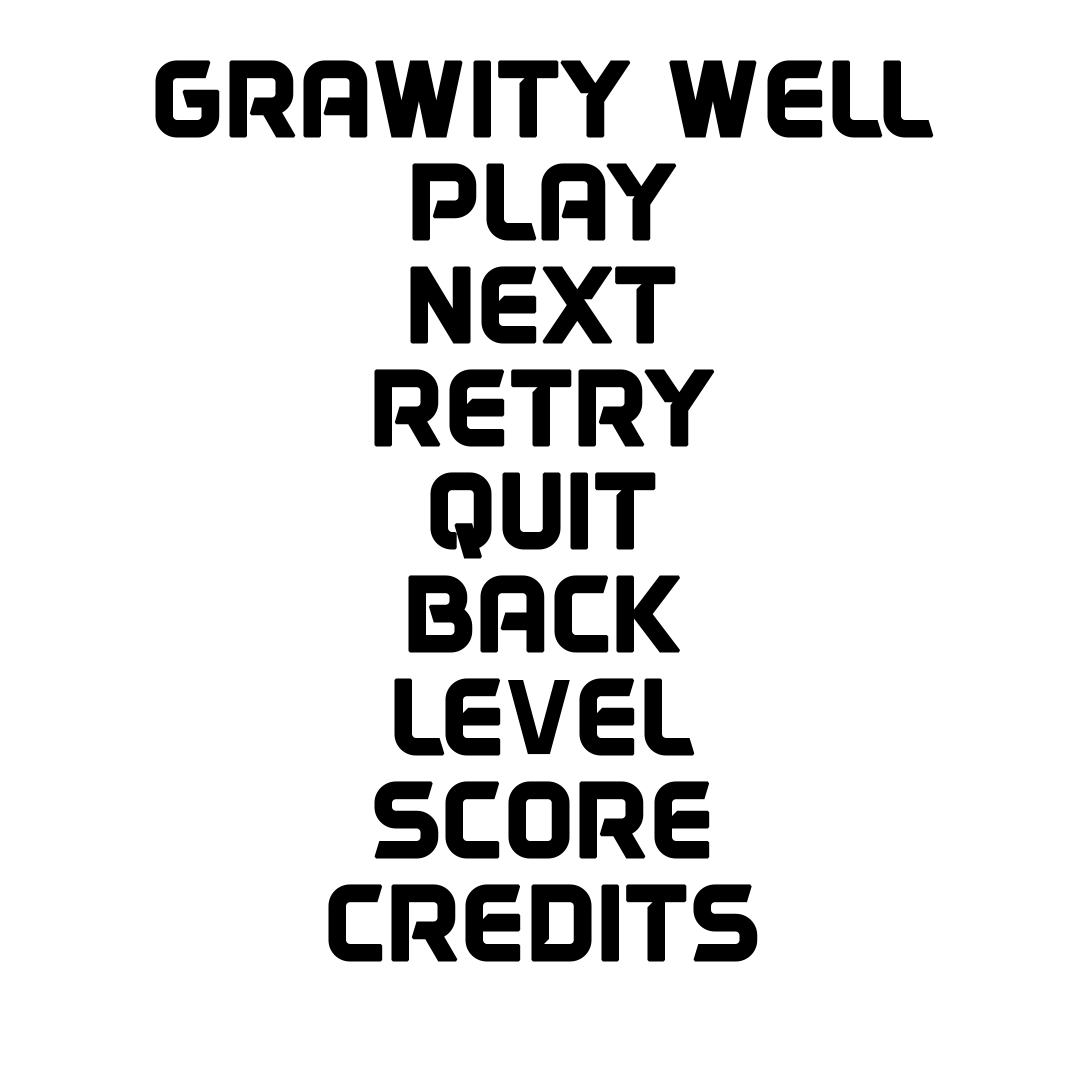
<style>
.page{position:relative;width:1080px;height:1080px;background:#ffffff}
.page>*{position:absolute;margin:0}
.t1{font:110px/103px "DAGGERSQUARE";color:#000000;font-weight:bold}
</style>
<div class="page">
<p class="t1" style="left:155px;top:60px;width:779px;height:902px;text-align:center">GRAWITY WELL<br>PLAY<br>NEXT<br>RETRY<br>QUIT<br>BACK<br>LEVEL<br>SCORE<br>CREDITS</p>
</div>
